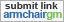
<style>
.page{position:relative;width:64px;height:22px}
.page>*{position:absolute;margin:0}
.t1{font:10px "Arial-BoldMT";color:#333333}
.t2{font:11px "Arial-BoldMT";letter-spacing:-0.04em;color:#376ea6}
.t3{font:11px "Arial-BoldMT";letter-spacing:-0.04em;color:#78ba5d}
</style>
<div class="page">
<p class="t1" style="left:5px;top:2px;width:53px;height:7px">submit link</p>
<p class="t2" style="left:3px;top:10px;width:59px;height:10px">armchair<span class="t3">gm</span></p>
</div>
